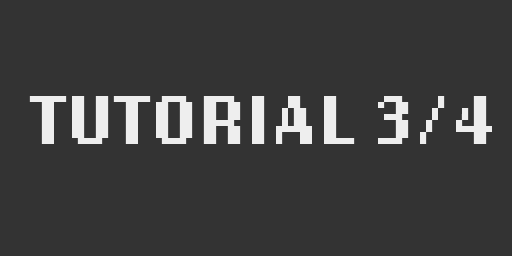
<style>
.page{position:relative;width:512px;height:256px;background:#333333}
.page>*{position:absolute;margin:0}
.t1{font:72px "LoRes12OT-Bold";color:#eeeeee}
</style>
<div class="page">
<p class="t1" style="left:29px;top:96px;width:463px;height:48px">TUTORIAL 3/4</p>
</div>
